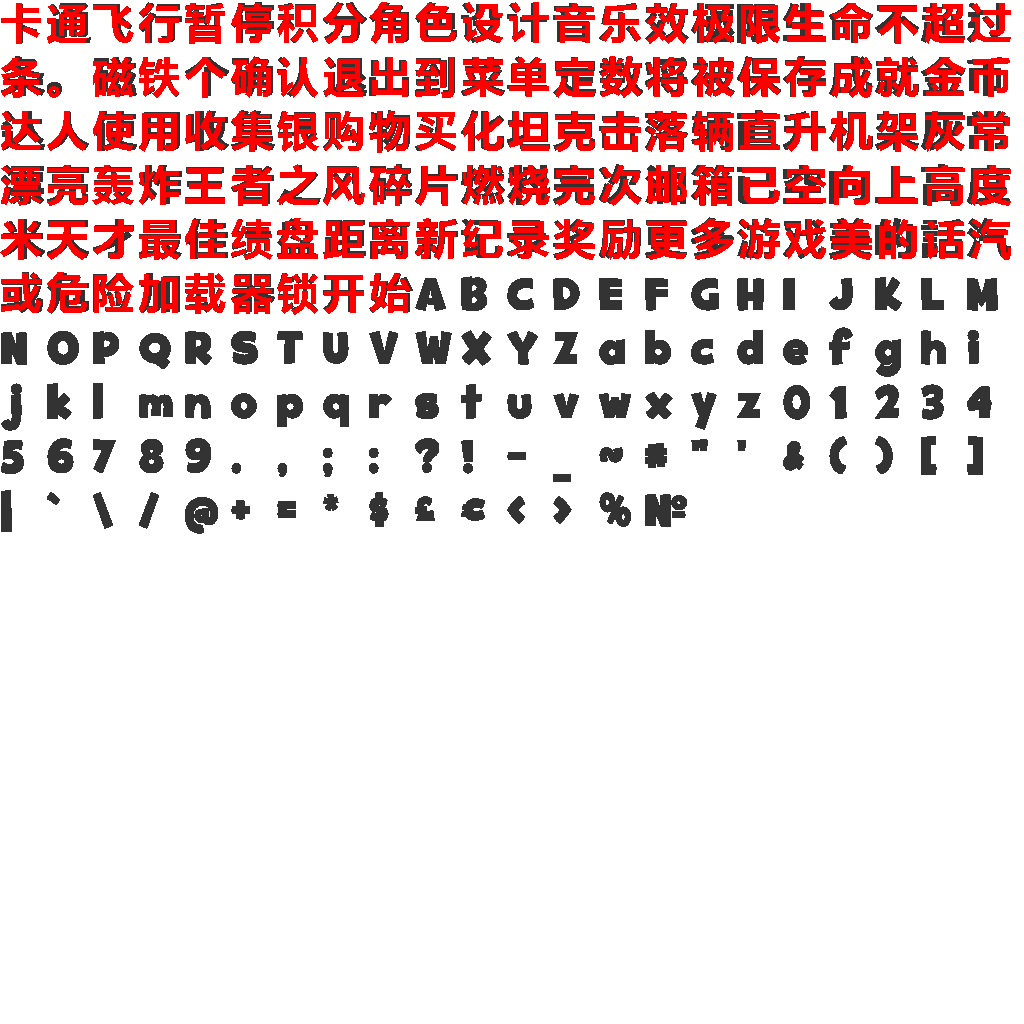
<style>
.page{position:relative;width:1024px;height:1024px;background:#ffffff}
.page>*{position:absolute;margin:0}
.t1{font:42px/54px "MicrosoftYaHei-Bold";letter-spacing:0.1em;color:#ff0000}
</style>
<div class="page">
<p class="t1" style="left:0px;top:2px;width:1011px;height:313px">卡通飞行暂停积分角色设计音乐效极限生命不超过<br>条。磁铁个确认退出到菜单定数将被保存成就金币<br>达人使用收集银购物买化坦克击落辆直升机架灰常<br>漂亮轰炸王者之风碎片燃烧完次邮箱已空向上高度<br>米天才最佳绩盘距离新纪录奖励更多游戏美的话汽<br>或危险加载器锁开始</p>
</div>
